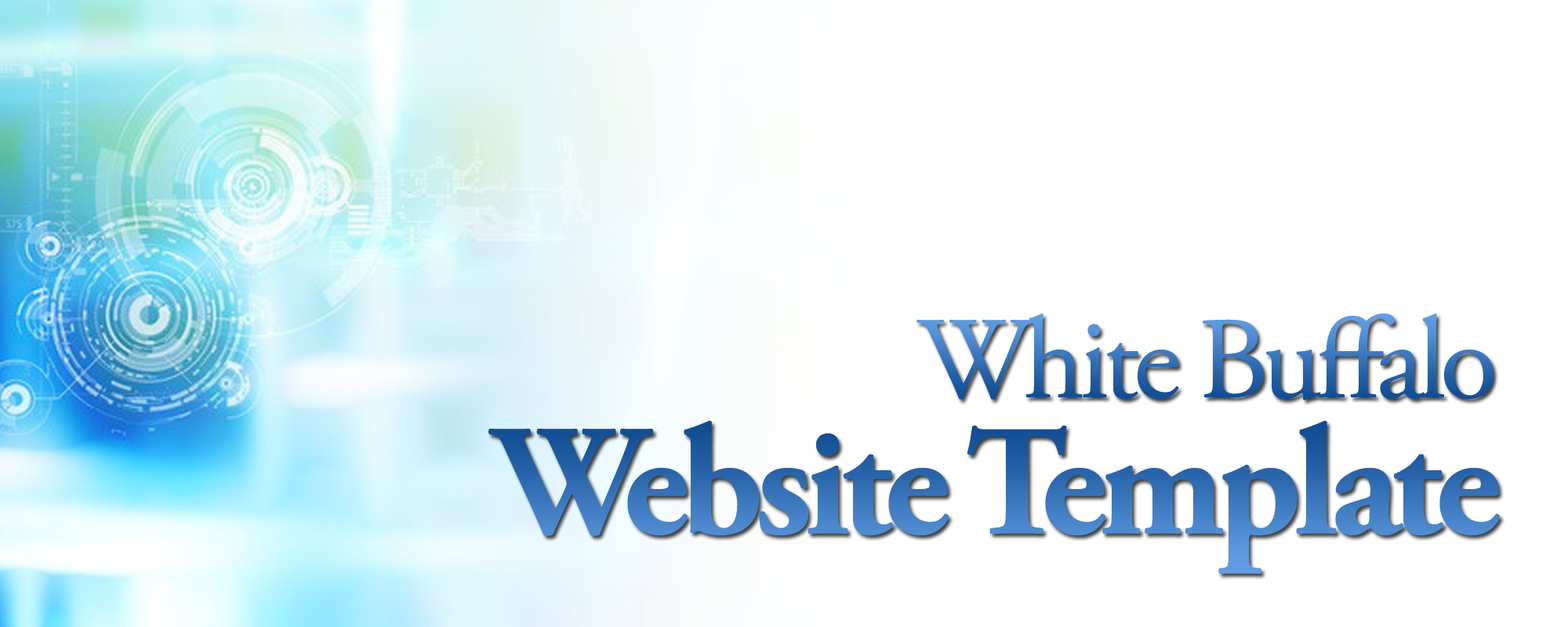
<style>
.page{position:relative;width:1568px;height:627px;background:#ffffff}
.page>*{position:absolute;margin:0}
.t1{font:117.6px "AGaramondPro-Regular";letter-spacing:-0.05em}
.t2{font:156.8px "AGaramondPro-Bold";letter-spacing:-0.05em}
</style>
<div class="page">
<p class="t1" style="left:916px;top:314px;width:578px;height:87px">White Buffalo</p>
<p class="t2" style="left:488px;top:420px;width:1013px;height:154px">Website Template</p>
</div>
